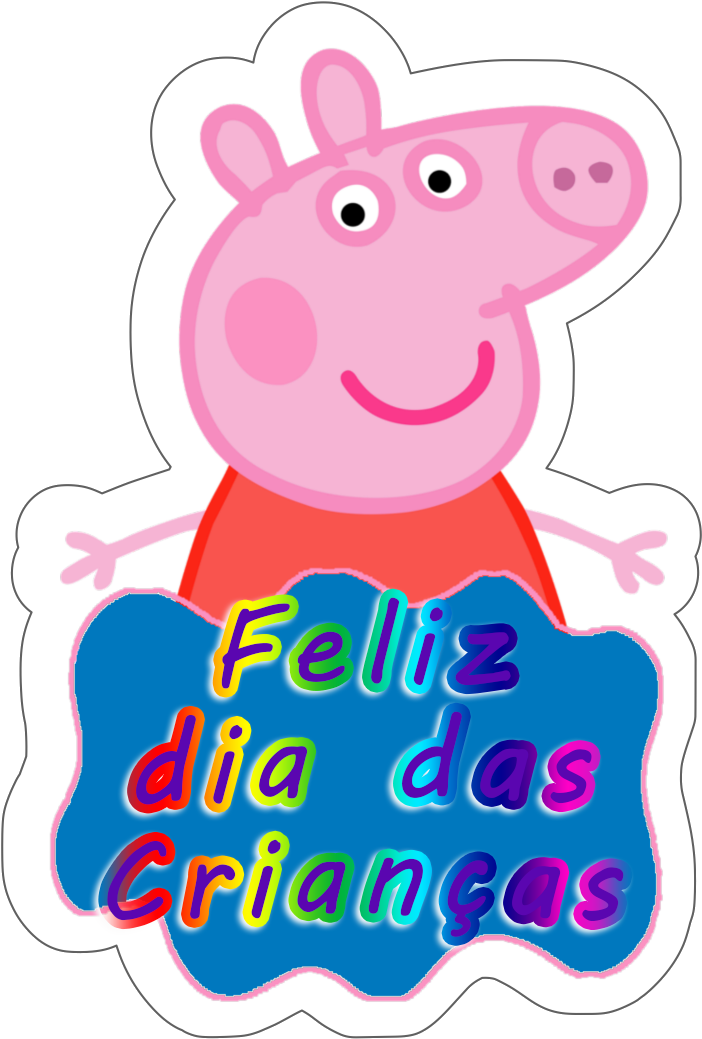
<style>
.page{position:relative;width:702px;height:1039px;background:#ffffff}
.page>*{position:absolute;margin:0}
.t1{font:114px/116px "MVBoli";letter-spacing:0.14em;color:#5a06b0}
.t2{font:124.2px/124px "MVBoli";letter-spacing:0.1em;color:#5a06b0}
</style>
<div class="page">
<p class="t1" style="left:107px;top:597px;width:517px;height:340px;text-align:center"><span class="t2"> </span>Feliz <br>dia das<br>Crianças</p>
</div>
